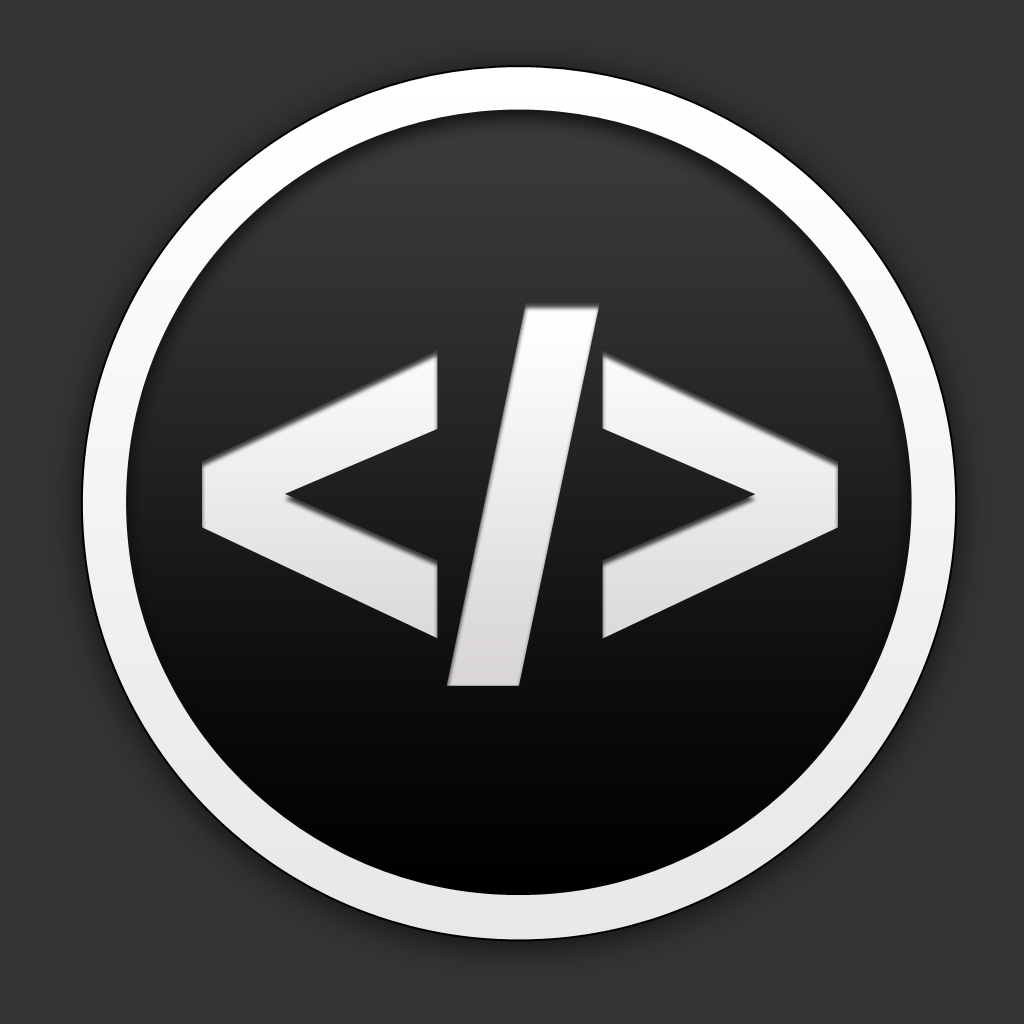
<style>
.page{position:relative;width:1024px;height:1024px;background:#333333}
.page>*{position:absolute;margin:0}
.t1{font:500px "Braggadocio";letter-spacing:-0.05em;color:#e9e7e7;scale:0.9 1}
</style>
<div class="page">
<p class="t1" style="left:202px;top:303px;width:636px;height:383px">&lt;/&gt;</p>
</div>
